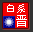
<style>
.page{position:relative;width:33px;height:32px;background:#f20000}
.page>*{position:absolute;margin:0}
.t1{font:10.4px "SimSun";color:#ffffff}
.t2{font:11.7px "SimSun";color:#ffffff}
</style>
<div class="page">
<p class="t1" style="left:7px;top:4px;width:18px;height:9px">白系</p>
<p class="t2" style="left:16px;top:15px;width:11px;height:12px">晋</p>
</div>
